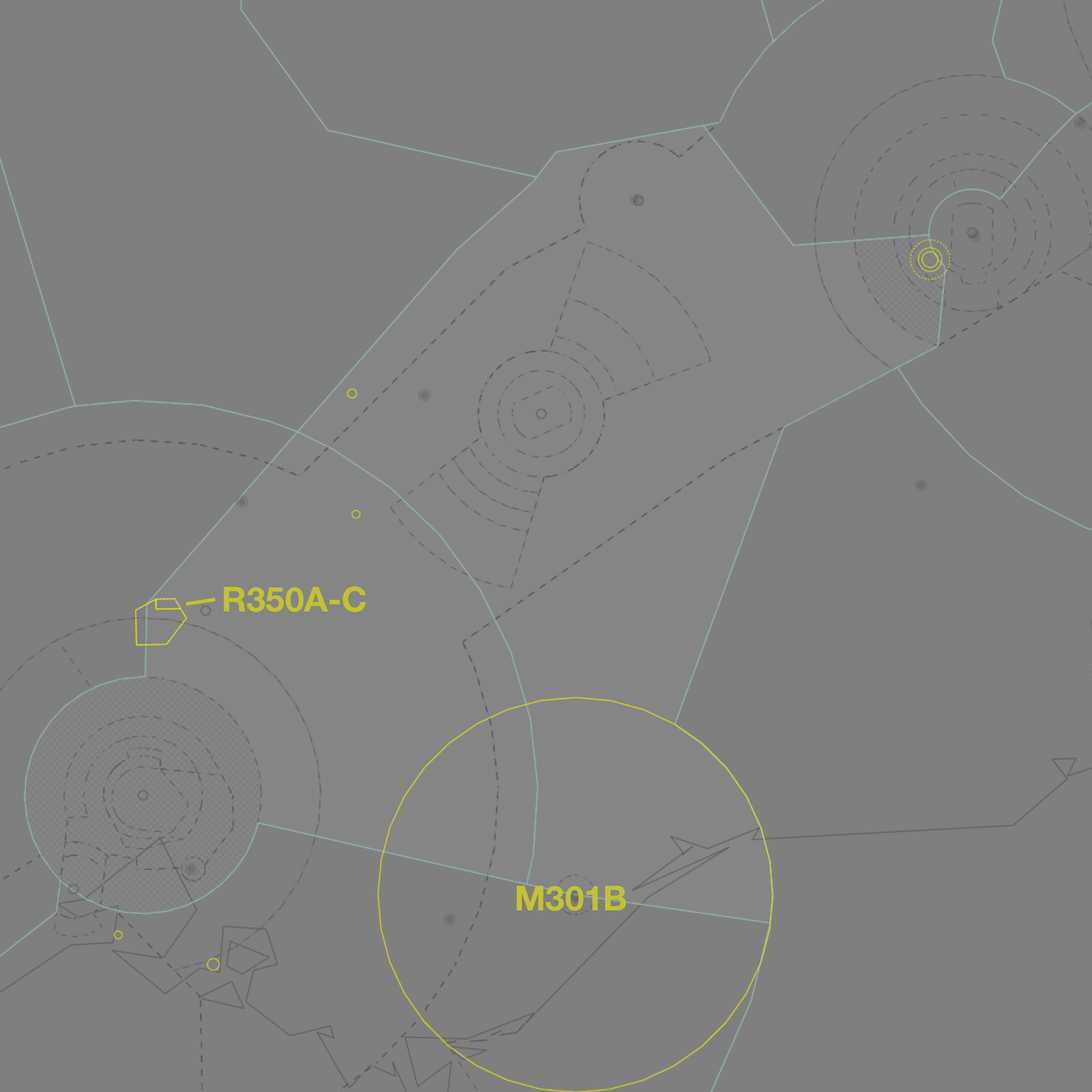
<style>
.page{position:relative;width:1092px;height:1092px;background:#7f7f7f}
.page>*{position:absolute;margin:0}
.t1{font:34.5px "HelveticaNeue-Bold";color:#c2c231}
</style>
<div class="page">
<p class="t1" style="left:224px;top:586px;width:142px;height:26px">R350A-C</p>
<p class="t1" style="left:517px;top:886px;width:109px;height:25px">M301B</p>
</div>
